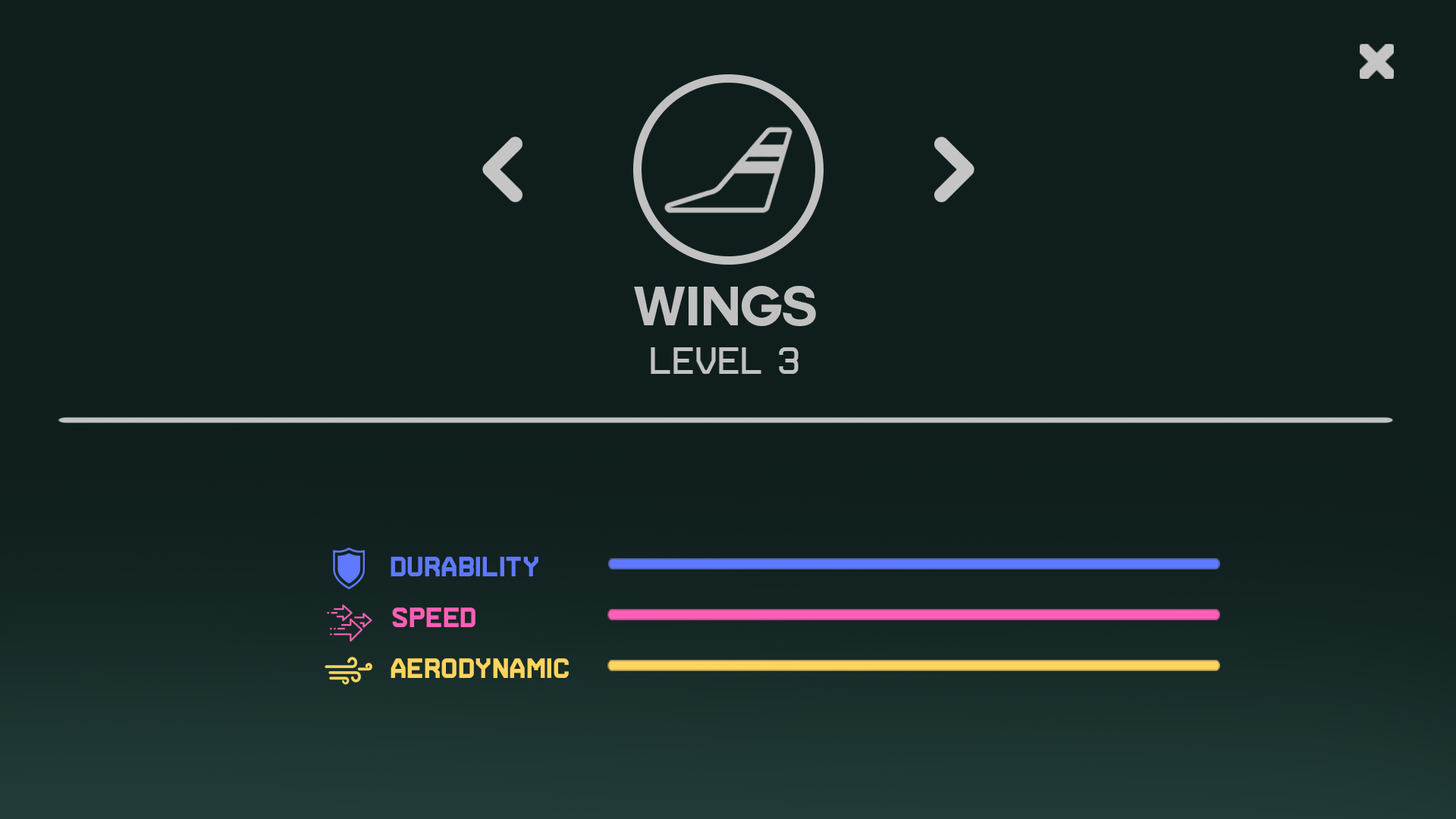
<style>
.page{position:relative;width:1456px;height:819px;background:#0f1e1c}
.page>*{position:absolute;margin:0}
.t1{font:54px "Couture-Bold";color:#c1c1c1}
.t2{font:37.8px "Arame-Regular";color:#c1c1c1}
.t3{font:27.9px "Arame-Bold";color:#5f79ff}
.t4{font:27.9px "Arame-Bold";color:#ff5fb6}
.t5{font:27.9px "Arame-Bold";color:#ffd45f}
</style>
<div class="page">
<p class="t1" style="left:634px;top:286px;width:182px;height:40px">Wings</p>
<p class="t2" style="left:651px;top:347px;width:110px;height:27px">Level</p>
<p class="t2" style="left:779px;top:347px;width:20px;height:27px">3</p>
<p class="t3" style="left:391px;top:557px;width:147px;height:19px">DURABILITY</p>
<p class="t4" style="left:392px;top:607px;width:83px;height:20px">Speed</p>
<p class="t5" style="left:391px;top:658px;width:178px;height:20px">AerodynaMIC</p>
</div>
